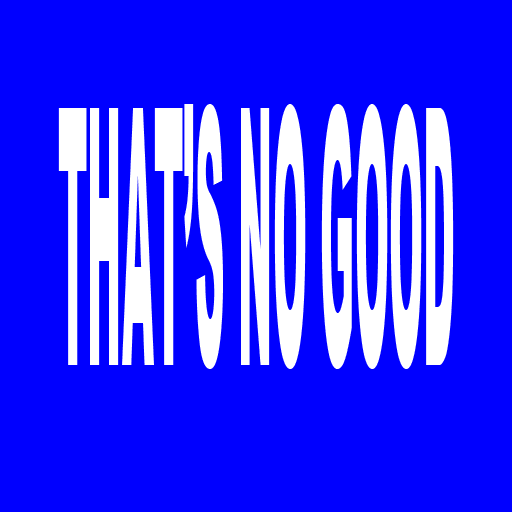
<style>
.page{position:relative;width:512px;height:512px;background:#0000ff}
.page>*{position:absolute;margin:0}
.t1{font:358.9px "Arial-Black";color:#ffffff;scale:0.11 1}
</style>
<div class="page">
<p class="t1" style="left:58px;top:104px;width:396px;height:265px">THAT’S NO GOOD</p>
</div>
